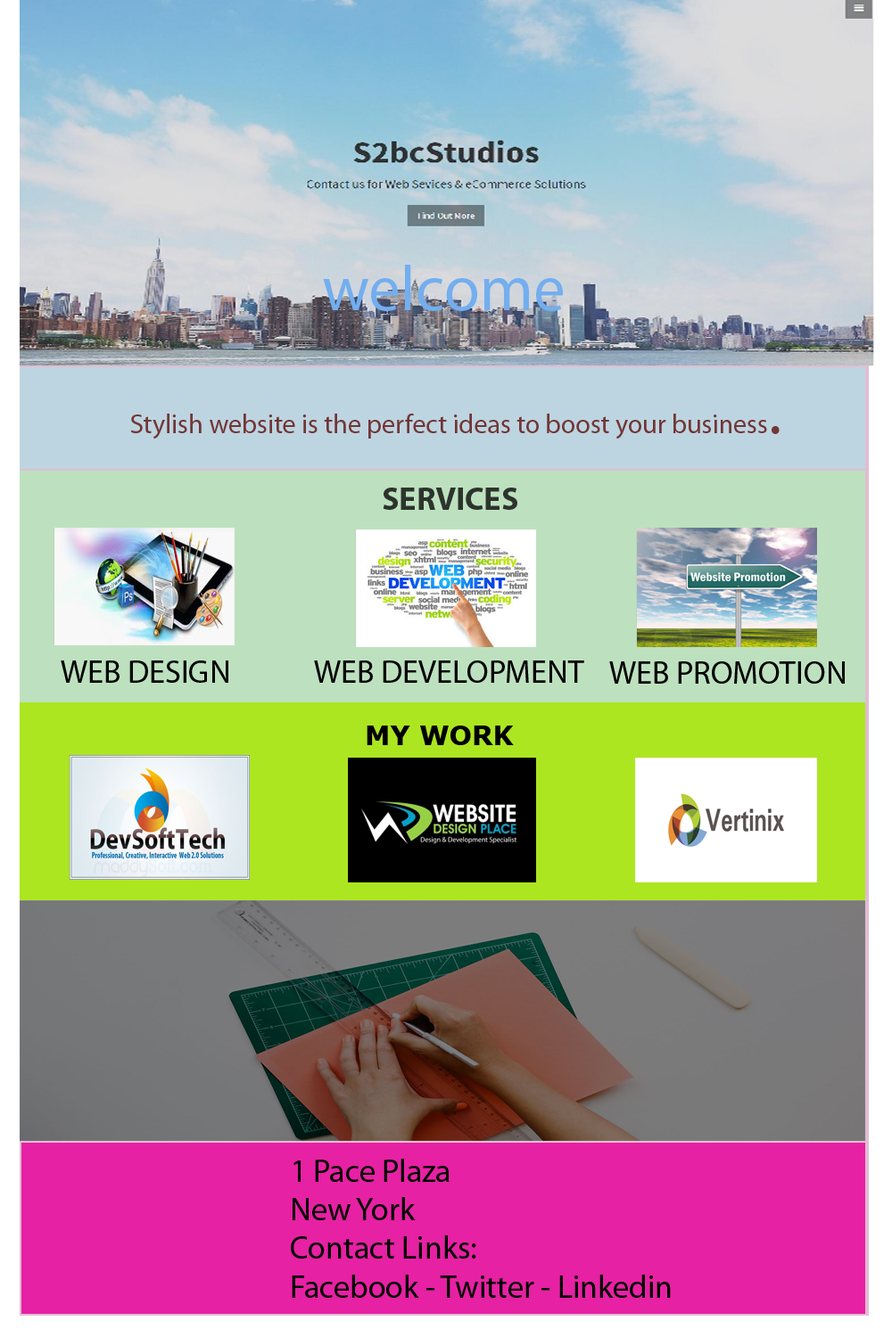
<style>
.page{position:relative;width:892px;height:1337px}
.page>*{position:absolute;margin:0}
.t1{font:64.2px "MyriadPro-Regular";color:#73aeef}
.t2{font:26.7px "MyriadPro-Regular";color:#723636}
.t3{font:64.2px "MyriadPro-Regular";color:#723636}
.t4{font:32.1px "MyriadPro-Bold";color:#2c342c}
.t5{font:32.1px "MyriadPro-Regular";color:#000000}
.t6{font:26.7px "Verdana-Bold";color:#000000}
</style>
<div class="page">
<p class="t1" style="left:323px;top:265px;width:240px;height:46px">welcome</p>
<p class="t2" style="left:130px;top:414px;width:649px;height:26px">Stylish website is the perfect ideas to boost your business<span class="t3">.</span></p>
<p class="t4" style="left:382px;top:488px;width:135px;height:22px">SERVICES</p>
<p class="t5" style="left:61px;top:661px;width:167px;height:22px">WEB DESIGN</p>
<p class="t5" style="left:314px;top:661px;width:270px;height:22px">WEB DEVELOPMENT</p>
<p class="t5" style="left:609px;top:662px;width:235px;height:22px">WEB PROMOTION</p>
<p class="t6" style="left:366px;top:726px;width:148px;height:19px">MY WORK</p>
<p class="t5" style="left:291px;top:1159px;width:379px;height:139px">1 Pace Plaza<br>New York<br>Contact Links:<br>Facebook - Twitter - Linkedin</p>
</div>
